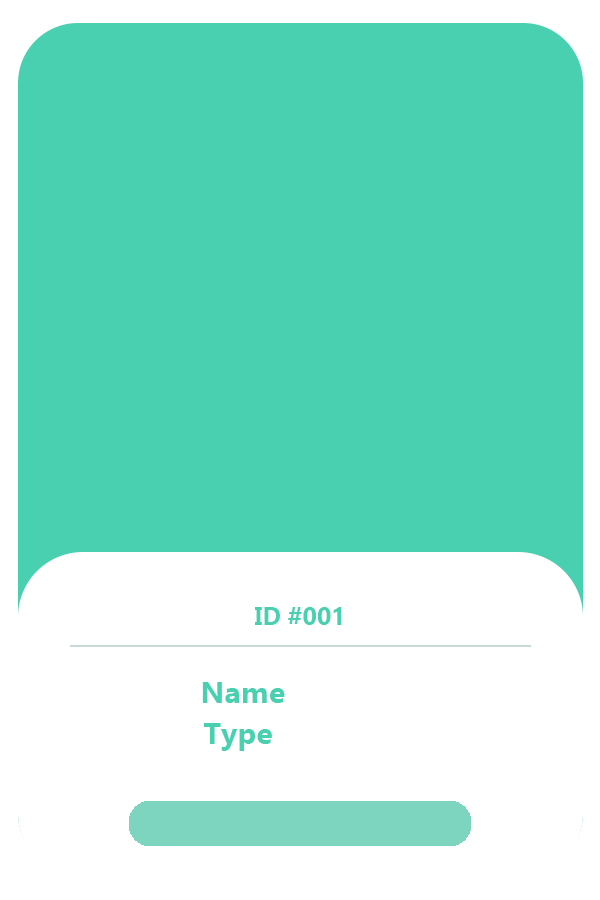
<style>
.page{position:relative;width:600px;height:900px;background:#48d0b0}
.page>*{position:absolute;margin:0}
.t1{font:24.9px "Ebrima-Bold";color:#48d0b0}
.t2{font:30.4px "Ebrima-Bold";color:#48d0b0}
</style>
<div class="page">
<p class="t1" style="left:255px;top:607px;width:87px;height:18px">ID #001</p>
<p class="t2" style="left:202px;top:682px;width:83px;height:21px">Name</p>
<p class="t2" style="left:203px;top:723px;width:69px;height:28px">Type</p>
</div>
